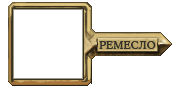
<style>
.page{position:relative;width:192px;height:88px;background:#ffffff}
.page>*{position:absolute;margin:0}
.t1{font:10.6px "CooperMediumCBT";letter-spacing:0.04em;color:#33332a;text-transform:uppercase}
</style>
<div class="page">
<p class="t1" style="left:99px;top:41px;width:57px;height:8px">ремесло</p>
</div>
